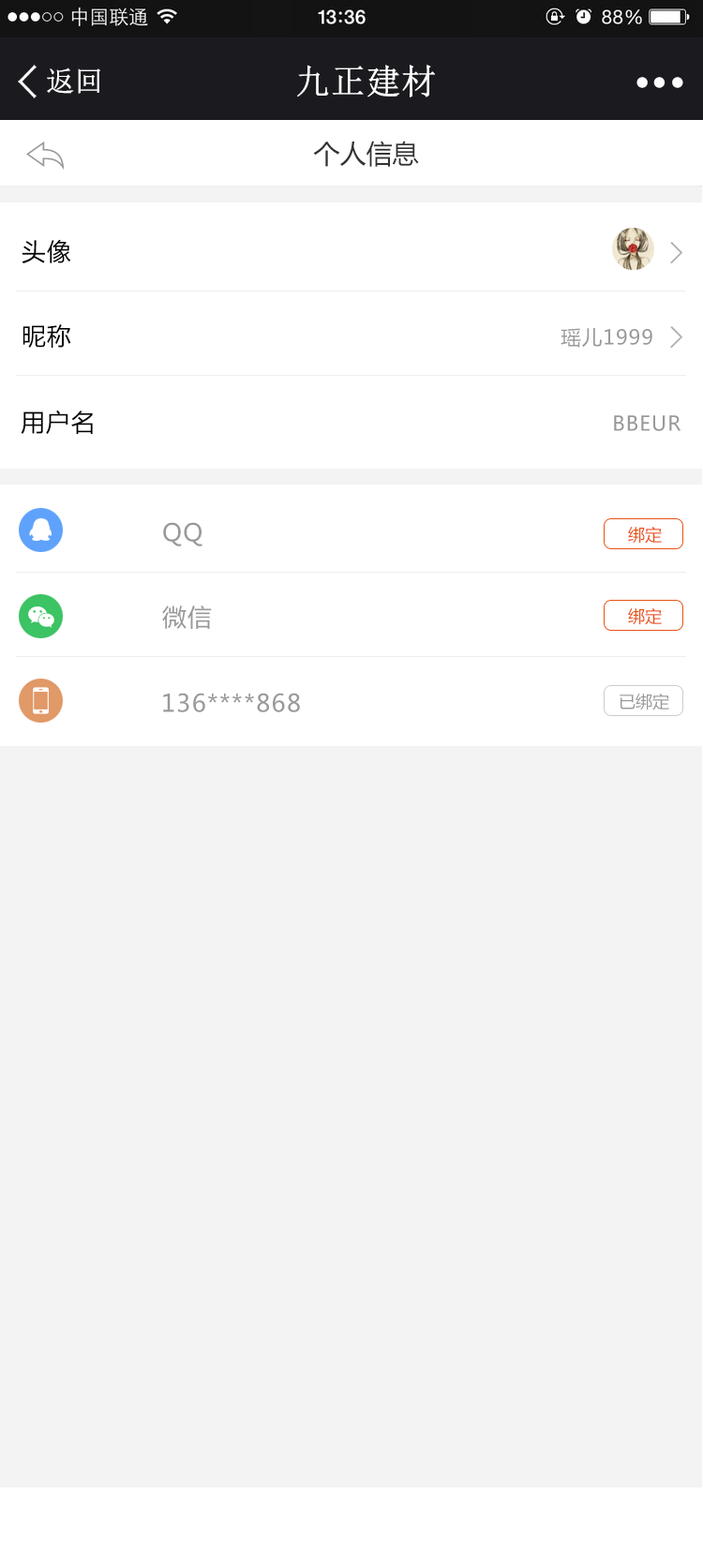
<style>
.page{position:relative;width:703px;height:1568px;background:#f3f3f3}
.page>*{position:absolute;margin:0}
.t1{font:34.4px "NSimSun";color:#ffffff;font-weight:bold}
.t2{font:28.1px "NSimSun";color:#ffffff;font-weight:bold}
.t3{font:26.2px "MicrosoftYaHei";color:#333333}
.t4{font:26.2px "MicrosoftYaHei";color:#333333;font-weight:bold}
.t5{font:24.1px "MicrosoftYaHei";letter-spacing:0.05em;color:#000000}
.t6{font:20.1px "MicrosoftYaHei";letter-spacing:0.05em;color:#999999}
.t7{font:24.1px "MicrosoftYaHei";letter-spacing:0.05em;color:#999999}
.t8{font:16.9px "MicrosoftYaHei";color:#ea5114}
.t9{font:16.9px "MicrosoftYaHei";color:#999999}
</style>
<div class="page">
<p class="t1" style="left:297px;top:65px;width:138px;height:32px">九正建材</p>
<p class="t2" style="left:47px;top:67px;width:53px;height:27px">返回</p>
<p class="t3" style="left:313px;top:141px;width:106px;height:26px"><span class="t4"><br></span>个人信息</p>
<p class="t5" style="left:22px;top:240px;width:49px;height:23px">头像</p>
<p class="t5" style="left:22px;top:324px;width:49px;height:24px">昵称</p>
<p class="t6" style="left:560px;top:328px;width:92px;height:20px">瑶儿1999</p>
<p class="t5" style="left:21px;top:411px;width:72px;height:23px">用户名</p>
<p class="t6" style="left:614px;top:415px;width:67px;height:16px">BBEUR</p>
<p class="t7" style="left:163px;top:522px;width:39px;height:24px">QQ</p>
<p class="t8" style="left:628px;top:527px;width:34px;height:17px">绑定</p>
<p class="t7" style="left:162px;top:605px;width:50px;height:24px">微信</p>
<p class="t8" style="left:628px;top:608px;width:34px;height:17px">绑定</p>
<p class="t7" style="left:163px;top:693px;width:137px;height:19px">136****868</p>
<p class="t9" style="left:620px;top:694px;width:49px;height:16px">已绑定</p>
</div>
